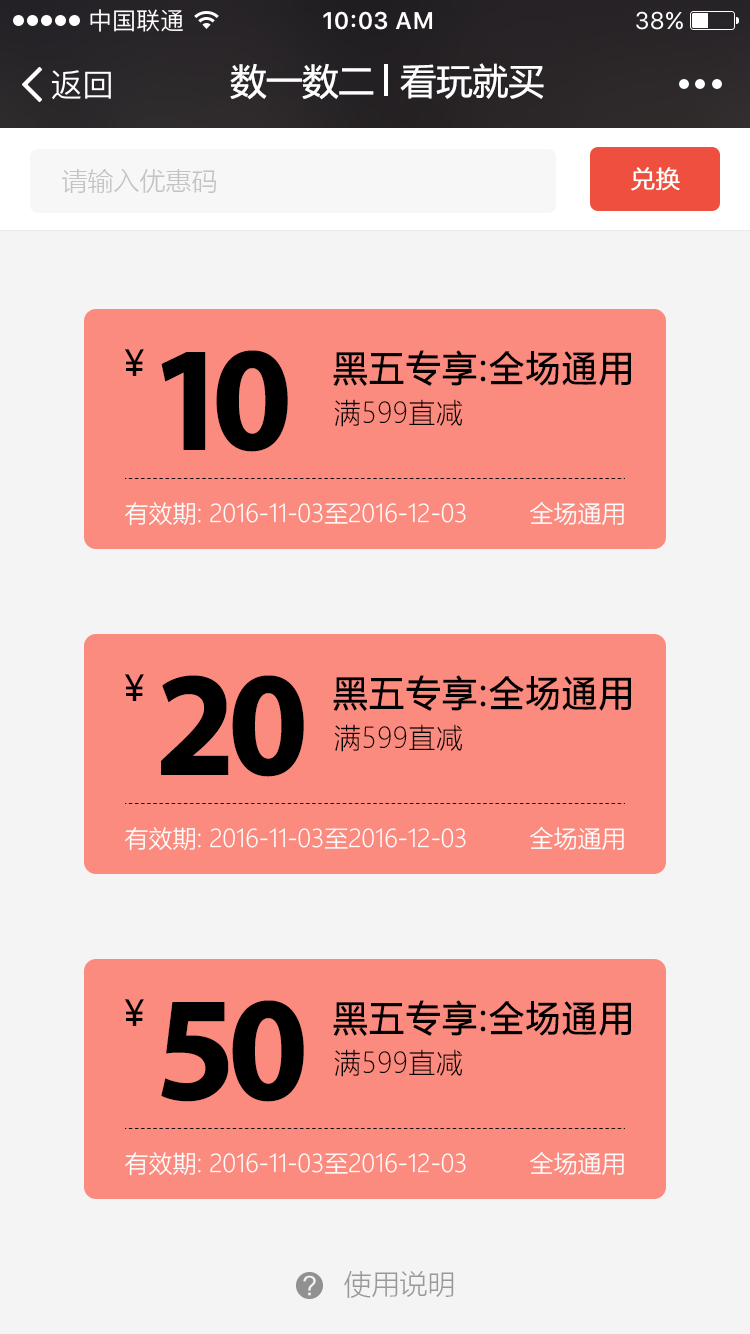
<style>
.page{position:relative;width:750px;height:1334px;background:#f4f4f4}
.page>*{position:absolute;margin:0}
.t1{font:36px "MicrosoftYaHei";color:#ffffff}
.t2{font:26px "MicrosoftYaHeiLight";color:#c4c4c4}
.t3{font:24px "MicrosoftYaHeiLight";color:#ffffff;font-weight:bold}
.t4{font:35.5px "MicrosoftYaHei";letter-spacing:0.03em;color:#000000;text-transform:uppercase}
.t5{font:150px "MyriadPro-Bold";letter-spacing:-0.15em;color:#000000;text-transform:uppercase;font-weight:bold;scale:0.97 1}
.t6{font:36px "MicrosoftYaHei";letter-spacing:0.03em;color:#000000;text-transform:uppercase;font-weight:bold;scale:0.96 1}
.t7{font:28px "MicrosoftYaHeiLight";letter-spacing:0.03em;color:#000000;text-transform:uppercase;scale:0.95 1}
.t8{font:24px "MicrosoftYaHeiLight";color:#ffffff}
.t9{font:150px "MyriadPro-Bold";letter-spacing:-0.08em;color:#000000;text-transform:uppercase;font-weight:bold;scale:0.97 1}
.t10{font:28px "MicrosoftYaHeiLight";color:#999999}
</style>
<div class="page">
<p class="t1" style="left:230px;top:63px;width:144px;height:37px">数一数二</p>
<p class="t1" style="left:400px;top:63px;width:144px;height:36px">看玩就买</p>
<p class="t2" style="left:62px;top:169px;width:154px;height:24px">请输入优惠码</p>
<p class="t3" style="left:631px;top:167px;width:49px;height:24px">兑换</p>
<p class="t4" style="left:124px;top:349px;width:20px;height:27px">￥</p>
<p class="t5" style="left:161px;top:350px;width:127px;height:102px">10</p>
<p class="t6" style="left:333px;top:350px;width:298px;height:36px">黑五专享:全场通用</p>
<p class="t7" style="left:334px;top:399px;width:128px;height:28px">满599直减</p>
<p class="t8" style="left:125px;top:502px;width:341px;height:24px">有效期: 2016-11-03至2016-12-03</p>
<p class="t8" style="left:530px;top:502px;width:94px;height:23px">全场通用</p>
<p class="t4" style="left:124px;top:674px;width:20px;height:27px">￥</p>
<p class="t9" style="left:161px;top:675px;width:143px;height:102px">20</p>
<p class="t6" style="left:333px;top:675px;width:298px;height:36px">黑五专享:全场通用</p>
<p class="t7" style="left:334px;top:724px;width:128px;height:28px">满599直减</p>
<p class="t8" style="left:125px;top:827px;width:341px;height:24px">有效期: 2016-11-03至2016-12-03</p>
<p class="t8" style="left:530px;top:827px;width:94px;height:23px">全场通用</p>
<p class="t4" style="left:124px;top:999px;width:20px;height:27px">￥</p>
<p class="t9" style="left:161px;top:1000px;width:143px;height:102px">50</p>
<p class="t6" style="left:333px;top:1000px;width:298px;height:36px">黑五专享:全场通用</p>
<p class="t7" style="left:334px;top:1049px;width:128px;height:28px">满599直减</p>
<p class="t8" style="left:125px;top:1152px;width:341px;height:24px">有效期: 2016-11-03至2016-12-03</p>
<p class="t8" style="left:530px;top:1152px;width:94px;height:23px">全场通用</p>
<p class="t10" style="left:344px;top:1271px;width:110px;height:27px">使用说明</p>
</div>
